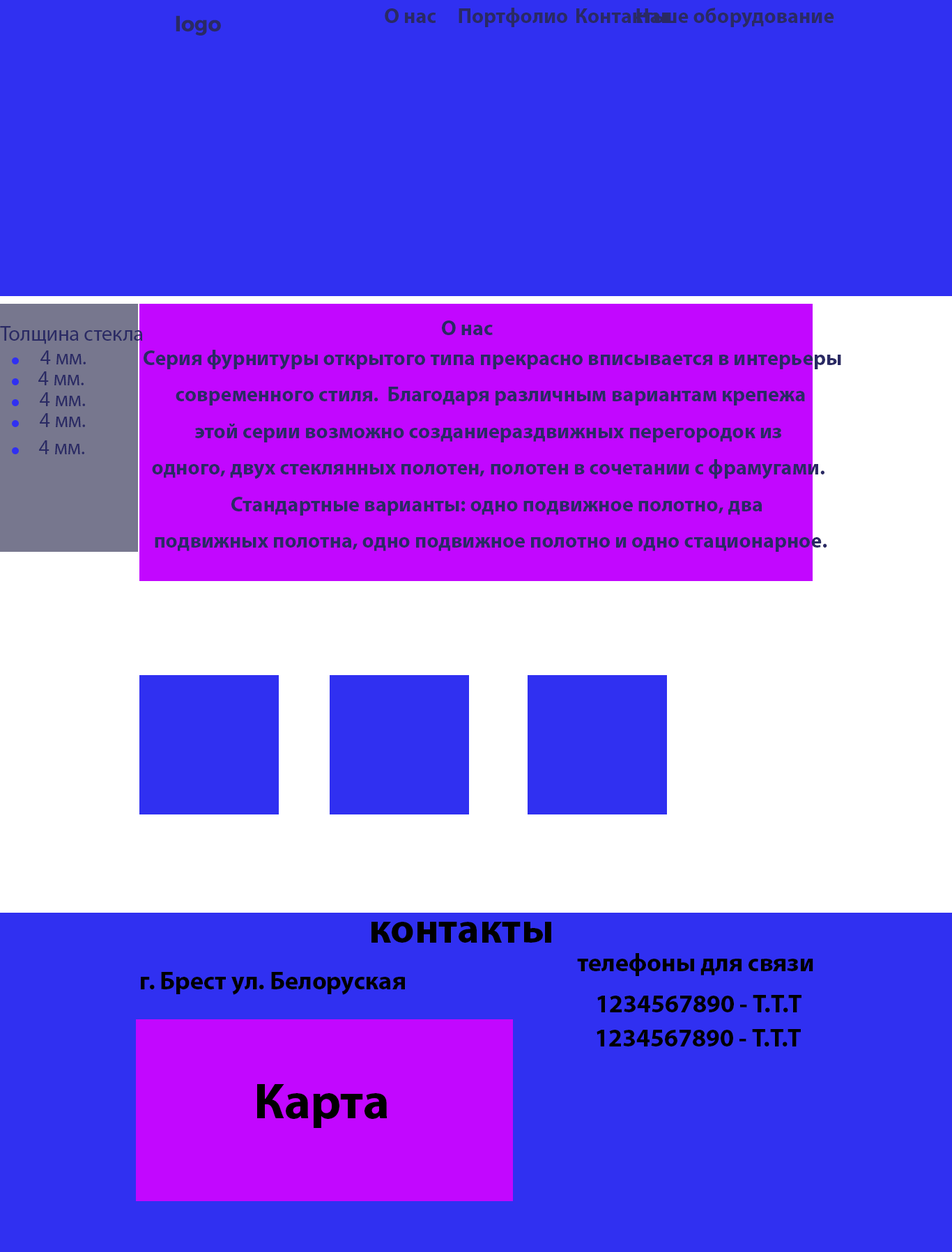
<style>
.page{position:relative;width:952px;height:1252px;background:#3030f1}
.page>*{position:absolute;margin:0}
.t1{font:20.9px "Montserrat-Bold";color:#2a2a64}
.t2{font:20.9px "MyriadPro-Bold";color:#2a2a64}
.t3{font:20.9px "MyriadPro-Regular";color:#2a2a64}
.t4{font:41.8px "MyriadPro-Bold";color:#000000}
.t5{font:25.1px "MyriadPro-Bold";color:#000000}
.t6{font:50.2px "MyriadPro-Bold";color:#000000}
</style>
<div class="page">
<p class="t1" style="left:176px;top:15px;width:45px;height:21px">logo</p>
<p class="t2" style="left:385px;top:8px;width:51px;height:15px">О нас</p>
<p class="t2" style="left:459px;top:8px;width:108px;height:19px">Портфолио</p>
<p class="t2" style="left:576px;top:8px;width:92px;height:15px">Контакты</p>
<p class="t2" style="left:636px;top:8px;width:198px;height:20px">Наше оборудование</p>
<p class="t3" style="left:0px;top:326px;width:143px;height:18px">Толщина стекла</p>
<p class="t2" style="left:442px;top:321px;width:51px;height:14px">О нас</p>
<p class="t3" style="left:40px;top:351px;width:46px;height:14px">4 мм.</p>
<p class="t2" style="left:144px;top:350px;width:697px;height:202px;text-align:center">Серия фурнитуры открытого типа прекрасно вписывается в интерьеры<br> современного стиля.  Благодаря различным вариантам крепежа<br> этой серии возможно созданиераздвижных перегородок из <br>одного, двух стеклянных полотен, полотен в сочетании с фрамугами.<br>    Стандартные варианты: одно подвижное полотно, два<br> подвижных полотна, одно подвижное полотно и одно стационарное.</p>
<p class="t3" style="left:38px;top:371px;width:46px;height:14px">4 мм.</p>
<p class="t3" style="left:40px;top:392px;width:45px;height:14px">4 мм.</p>
<p class="t3" style="left:40px;top:413px;width:45px;height:14px">4 мм.</p>
<p class="t3" style="left:39px;top:440px;width:45px;height:14px">4 мм.</p>
<p class="t4" style="left:371px;top:922px;width:180px;height:21px">контакты</p>
<p class="t5" style="left:577px;top:953px;width:236px;height:23px">телефоны для связи</p>
<p class="t5" style="left:141px;top:972px;width:264px;height:23px">г. Брест ул. Белоруская</p>
<p class="t5" style="left:597px;top:995px;width:205px;height:18px">1234567890 - Т.Т.Т</p>
<p class="t5" style="left:597px;top:1029px;width:204px;height:18px">1234567890 - Т.Т.Т</p>
<p class="t6" style="left:257px;top:1084px;width:131px;height:44px">Карта</p>
</div>
